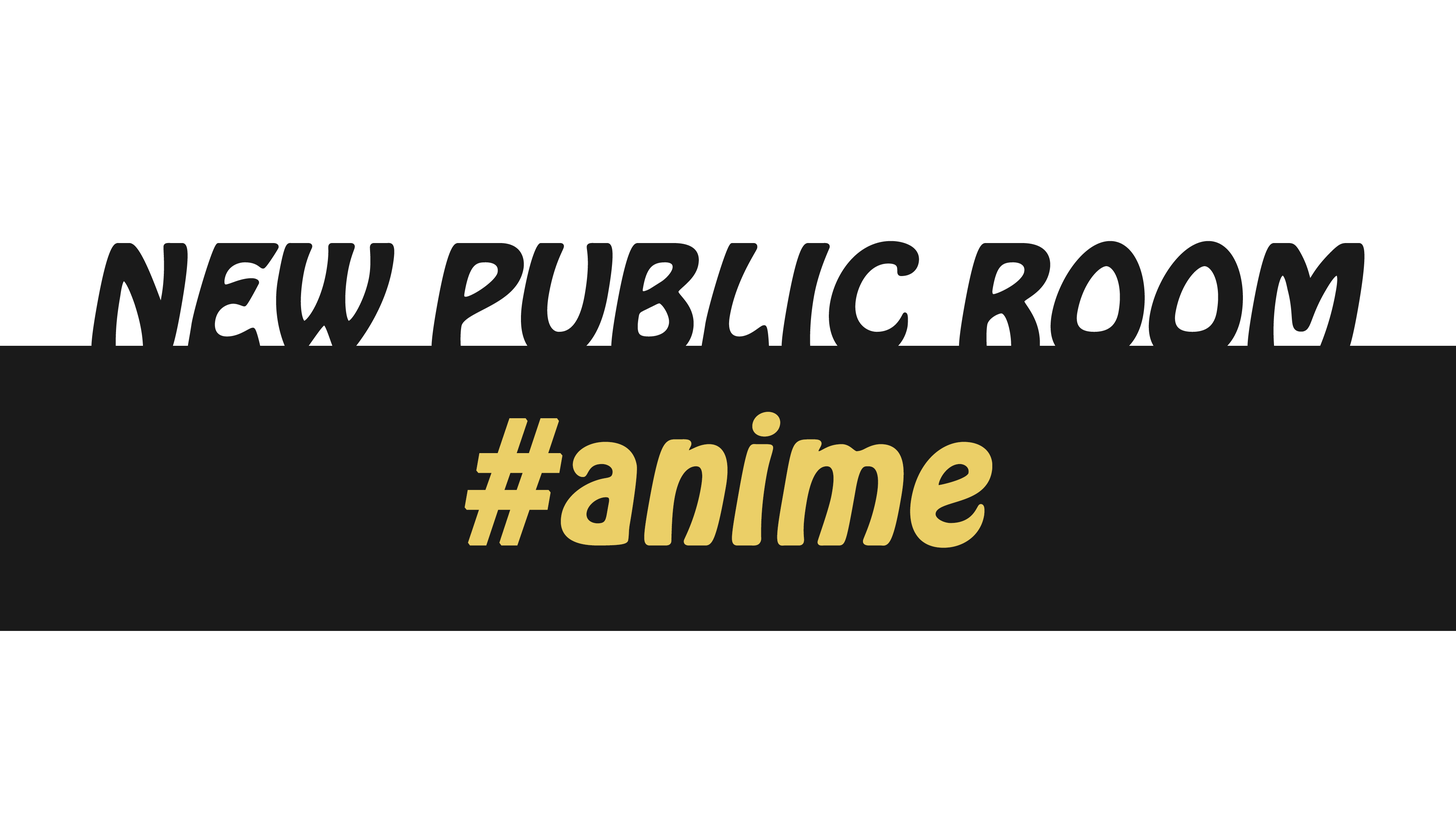
<style>
.page{position:relative;width:1456px;height:819px;background:#ffffff}
.page>*{position:absolute;margin:0}
.t1{font:132.7px "HoboStd";color:#1a1a1a;font-weight:bold;font-style:italic}
.t2{font:151.7px "HoboStd";color:#ebcf67;font-weight:bold;font-style:italic}
</style>
<div class="page">
<p class="t1" style="left:91px;top:241px;width:1274px;height:120px">NEW PUBLIC ROOM</p>
<p class="t2" style="left:464px;top:412px;width:528px;height:136px">#anime</p>
</div>
